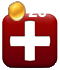
<style>
.page{position:relative;width:60px;height:70px;background:#ffffff}
.page>*{position:absolute;margin:0}
.t1{font:18.7px "Calibri-Bold";color:#ffffff}
</style>
<div class="page">
<p class="t1" style="left:28px;top:5px;width:19px;height:12px">20</p>
</div>
